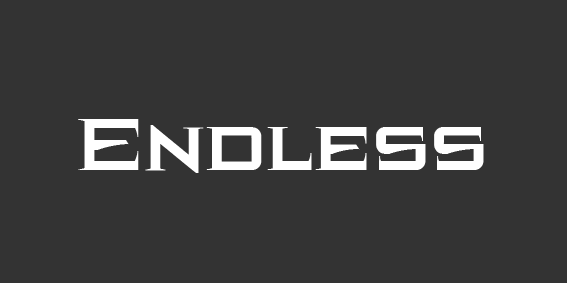
<style>
.page{position:relative;width:567px;height:283px;background:#333333}
.page>*{position:absolute;margin:0}
.t1{font:100px "BlackHoleBB";color:#ffffff}
</style>
<div class="page">
<p class="t1" style="left:78px;top:119px;width:406px;height:54px">Endless</p>
</div>
